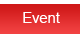
<style>
.page{position:relative;width:80px;height:40px;background:#ffffff}
.page>*{position:absolute;margin:0}
.t1{font:14.7px "ArialMT";color:#ffffff}
</style>
<div class="page">
<p class="t1" style="left:23px;top:12px;width:37px;height:11px">Event</p>
</div>
